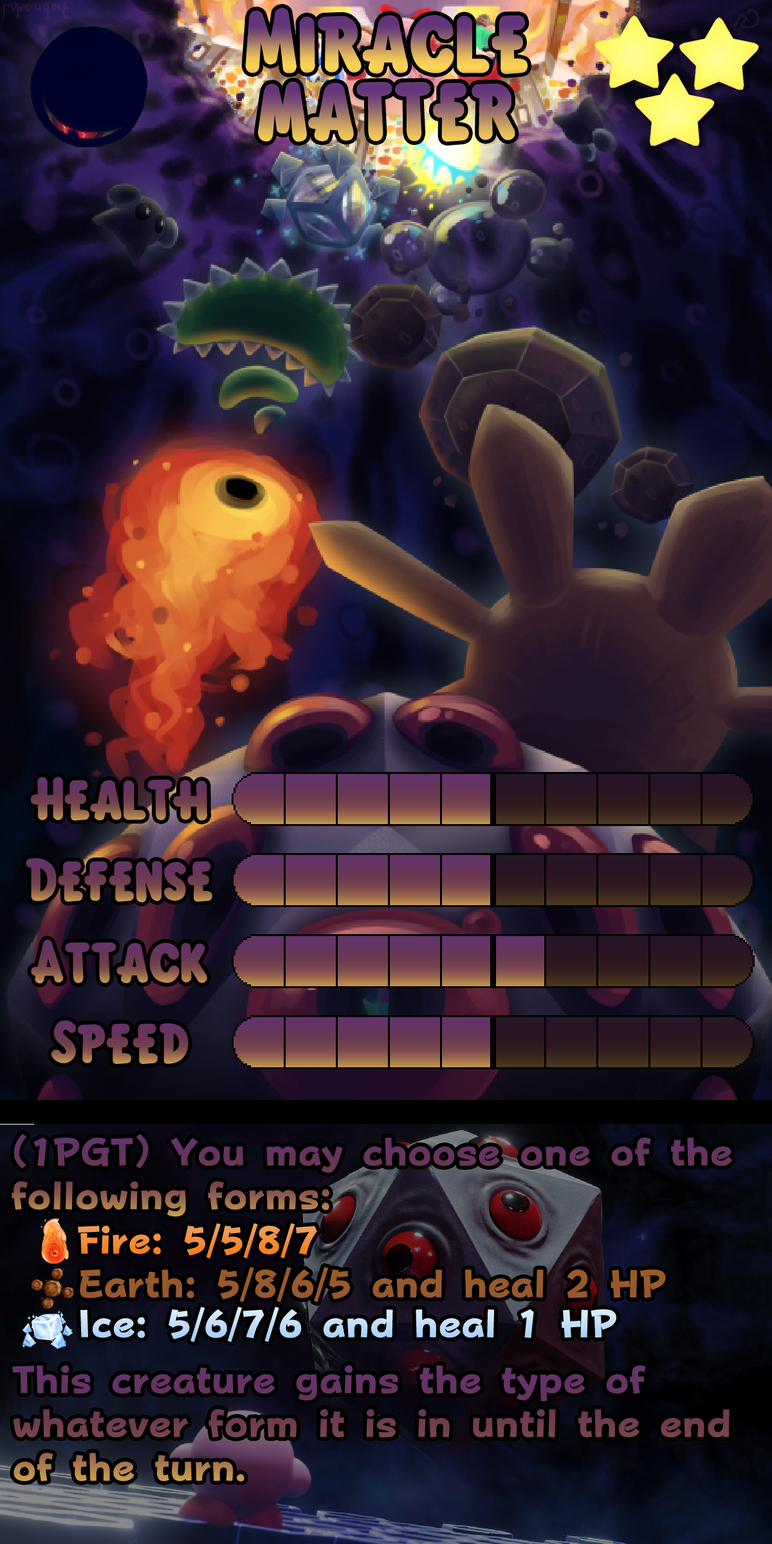
<style>
.page{position:relative;width:772px;height:1544px}
.page>*{position:absolute;margin:0}
.t1{font:135.1px/67.6px "KirbyClassic"}
.t2{font:92.7px "KirbyClassic"}
.t3{font:66.3px "FOTPopHappinessStrp-ExtraBold"}
.t4{font:66.3px "FOTPopHappinessStrp-ExtraBold";color:#98592b}
.t5{font:66.3px "FOTPopHappinessStrp-ExtraBold";color:#c0defc}
.t6{font:66.3px/43.8px "FOTPopHappinessStrp-ExtraBold"}
</style>
<div class="page">
<p class="t1" style="left:245px;top:8px;width:283px;height:134px;text-align:center">Miracle<br>matter</p>
<p class="t2" style="left:30px;top:777px;width:178px;height:44px">Health</p>
<p class="t2" style="left:26px;top:858px;width:186px;height:45px">Defense</p>
<p class="t2" style="left:31px;top:939px;width:176px;height:45px">Attack</p>
<p class="t2" style="left:51px;top:1021px;width:138px;height:43px">Speed</p>
<p class="t3" style="left:12px;top:1134px;width:720px;height:83px">(1PGT) You may choose one of the following forms:</p>
<p class="t3" style="left:78px;top:1223px;width:239px;height:36px">Fire: 5/5/8/7</p>
<p class="t4" style="left:80px;top:1267px;width:586px;height:35px">Earth: 5/8/6/5 and heal 2 HP</p>
<p class="t5" style="left:80px;top:1307px;width:536px;height:35px">Ice: 5/6/7/6 and heal 1 HP</p>
<p class="t6" style="left:12px;top:1365px;width:718px;height:117px">This creature gains the type of whatever form it is in until the end of the turn.</p>
</div>
